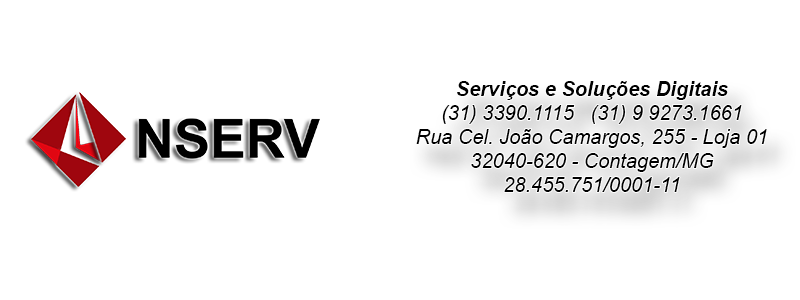
<style>
.page{position:relative;width:800px;height:300px;background:#ffffff}
.page>*{position:absolute;margin:0}
.t1{font:20px "Arial-ItalicMT";color:#000000}
.t2{font:20px "Arial-BoldItalicMT";color:#000000}
</style>
<div class="page">
<p class="t1" style="left:416px;top:81px;width:351px;height:111px;text-align:center"><span class="t2">Serviços e Soluções Digitais<br></span>(31) 3390.1115   (31) 9 9273.1661<br>Rua Cel. João Camargos, 255 - Loja 01<br>32040-620 - Contagem/MG<br>28.455.751/0001-11</p>
</div>
